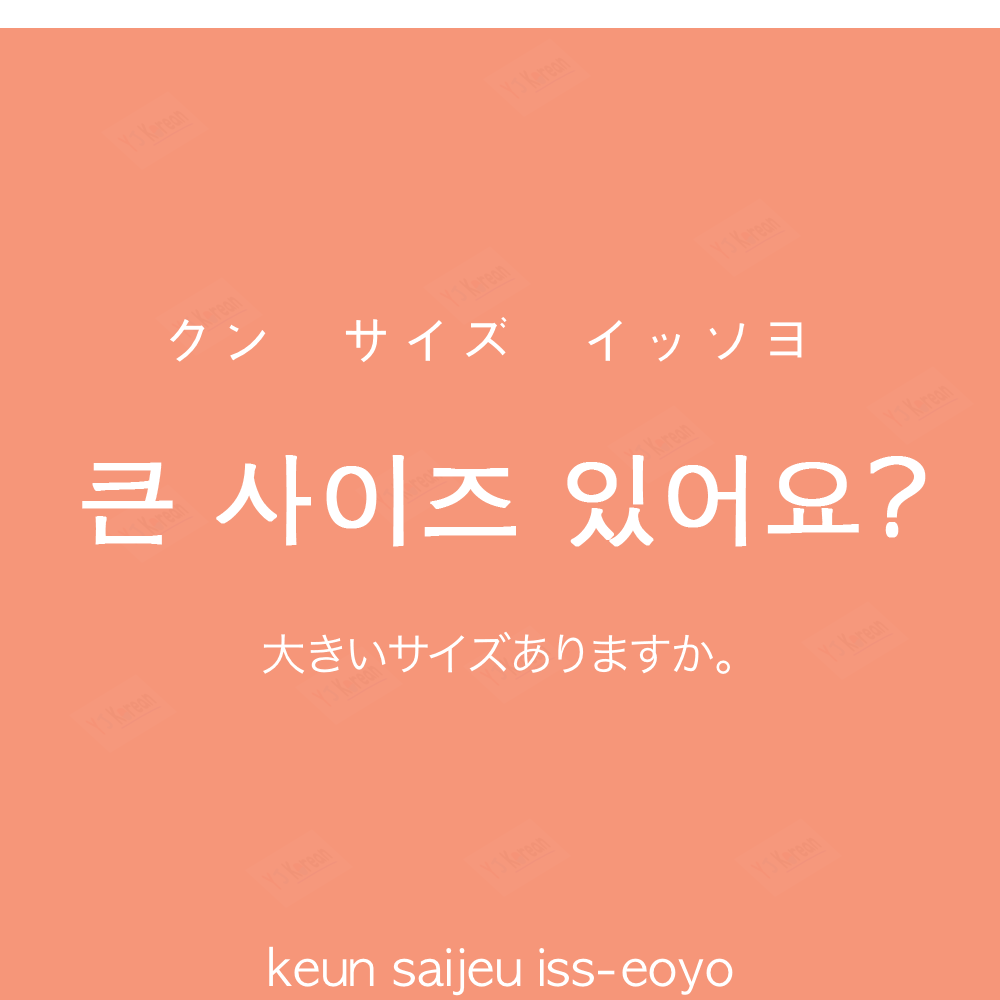
<style>
.page{position:relative;width:1000px;height:1000px;background:#f69679}
.page>*{position:absolute;margin:0}
.t1{font:60px "AppleGothic";color:#ffffff}
.t2{font:100px "AppleGothic";color:#ffffff;font-weight:bold}
.t3{font:45px "HiraKakuProN-W3";color:#ffffff}
.t4{font:50px "AppleGothic";color:#ffffff}
</style>
<div class="page">
<p class="t1" style="left:170px;top:317px;width:632px;height:46px">クン　サイズ　イッソヨ</p>
<p class="t2" style="left:82px;top:455px;width:844px;height:92px">큰 사이즈 있어요?</p>
<p class="t3" style="left:263px;top:631px;width:467px;height:43px">大きいサイズありますか。</p>
<p class="t4" style="left:269px;top:946px;width:464px;height:50px">keun saijeu iss-eoyo</p>
</div>
